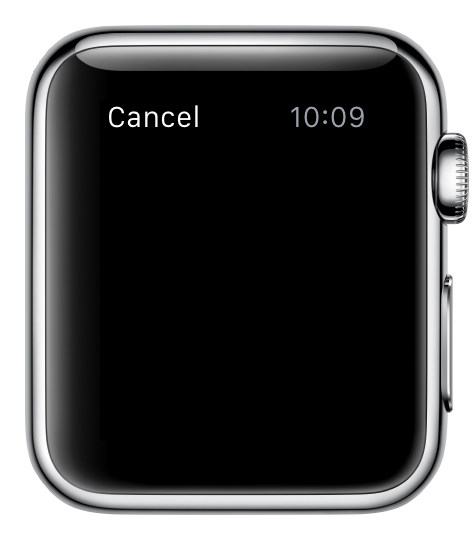
<style>
.page{position:relative;width:472px;height:540px;background:#000000}
.page>*{position:absolute;margin:0}
.t1{font:30px "SFCompactText-Regular";letter-spacing:0.004em;color:#ffffff}
.t2{font:30px "SFCompactText-Regular";letter-spacing:0.004em;color:#9ba0aa}
</style>
<div class="page">
<p class="t1" style="left:109px;top:105px;width:89px;height:23px">Cancel</p>
<p class="t2" style="left:291px;top:106px;width:73px;height:22px">10:09</p>
</div>
